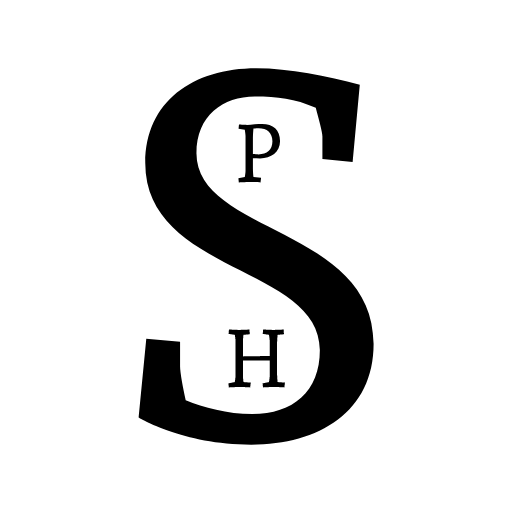
<style>
.page{position:relative;width:512px;height:512px;background:#ffffff}
.page>*{position:absolute;margin:0}
.t1{font:512px "AndadaSC-Regular";color:#000000}
.t2{font:81px "AndadaSC-Regular";color:#000000}
</style>
<div class="page">
<p class="t1" style="left:138px;top:68px;width:236px;height:377px">S</p>
<p class="t2" style="left:238px;top:124px;width:43px;height:59px">P</p>
<p class="t2" style="left:228px;top:329px;width:57px;height:59px">H</p>
</div>
